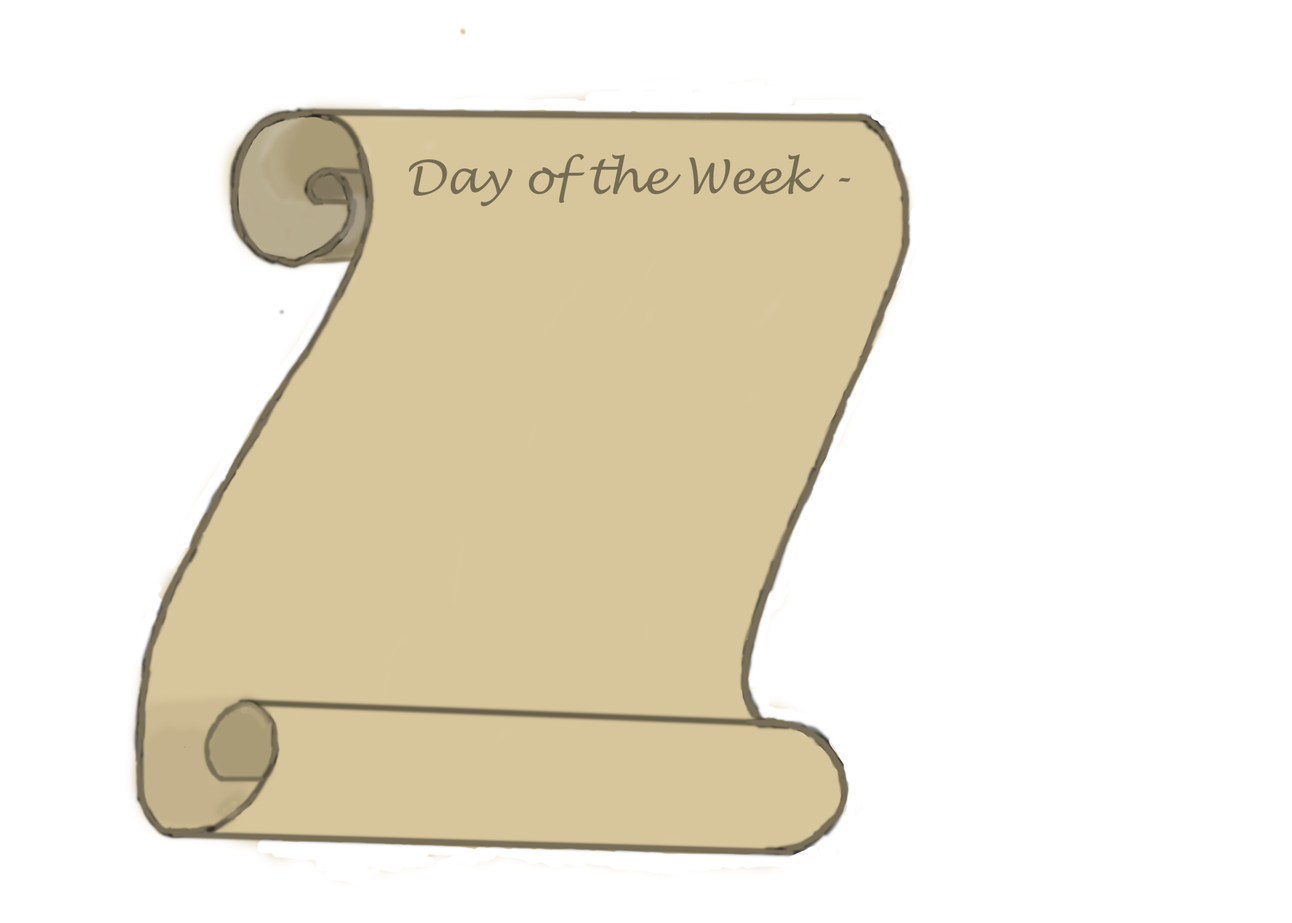
<style>
.page{position:relative;width:1292px;height:923px;background:#ffffff}
.page>*{position:absolute;margin:0}
.t1{font:46.1px "LucidaHandwriting-Italic";color:#766c54}
</style>
<div class="page">
<p class="t1" style="left:409px;top:154px;width:442px;height:53px">Day of the Week -</p>
</div>
